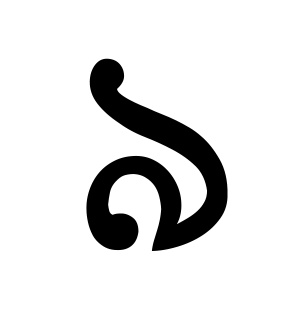
<style>
.page{position:relative;width:306px;height:320px;background:#ffffff}
.page>*{position:absolute;margin:0}
.t1{font:300px "KalpurushANSI";color:#000000}
</style>
<div class="page">
<p class="t1" style="left:86px;top:58px;width:142px;height:193px">9</p>
</div>
